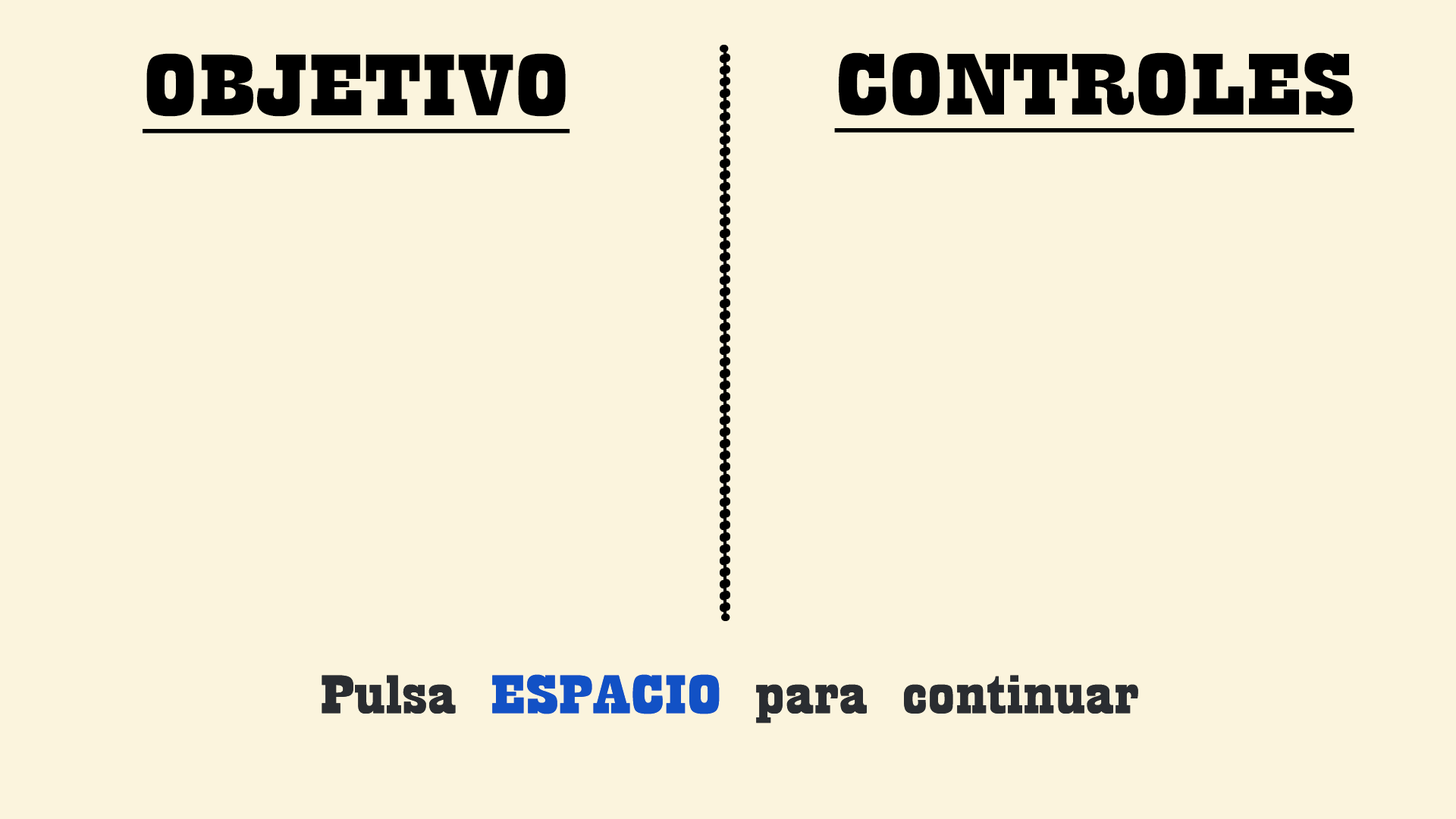
<style>
.page{position:relative;width:1456px;height:819px;background:#fbf4dd}
.page>*{position:absolute;margin:0}
.t1{font:91px "Playbill";color:#000000;text-decoration:underline;scale:2 1}
.t2{font:56.9px "Playbill";color:#2a2d31;scale:2 1}
.t3{font:56.9px "Playbill";color:#1251c5;scale:2 1}
</style>
<div class="page">
<p class="t1" style="left:143px;top:53px;width:427px;height:80px">OBJETIVO</p>
<p class="t1" style="left:834px;top:52px;width:520px;height:81px">CONTROLES</p>
<p class="t2" style="left:322px;top:674px;width:816px;height:49px">Pulsa<span class="t3"> ESPACIO </span>para continuar</p>
<p class="t2" style="left:322px;top:674px;width:816px;height:49px">Pulsa<span class="t3"> ESPACIO </span>para continuar</p>
</div>
